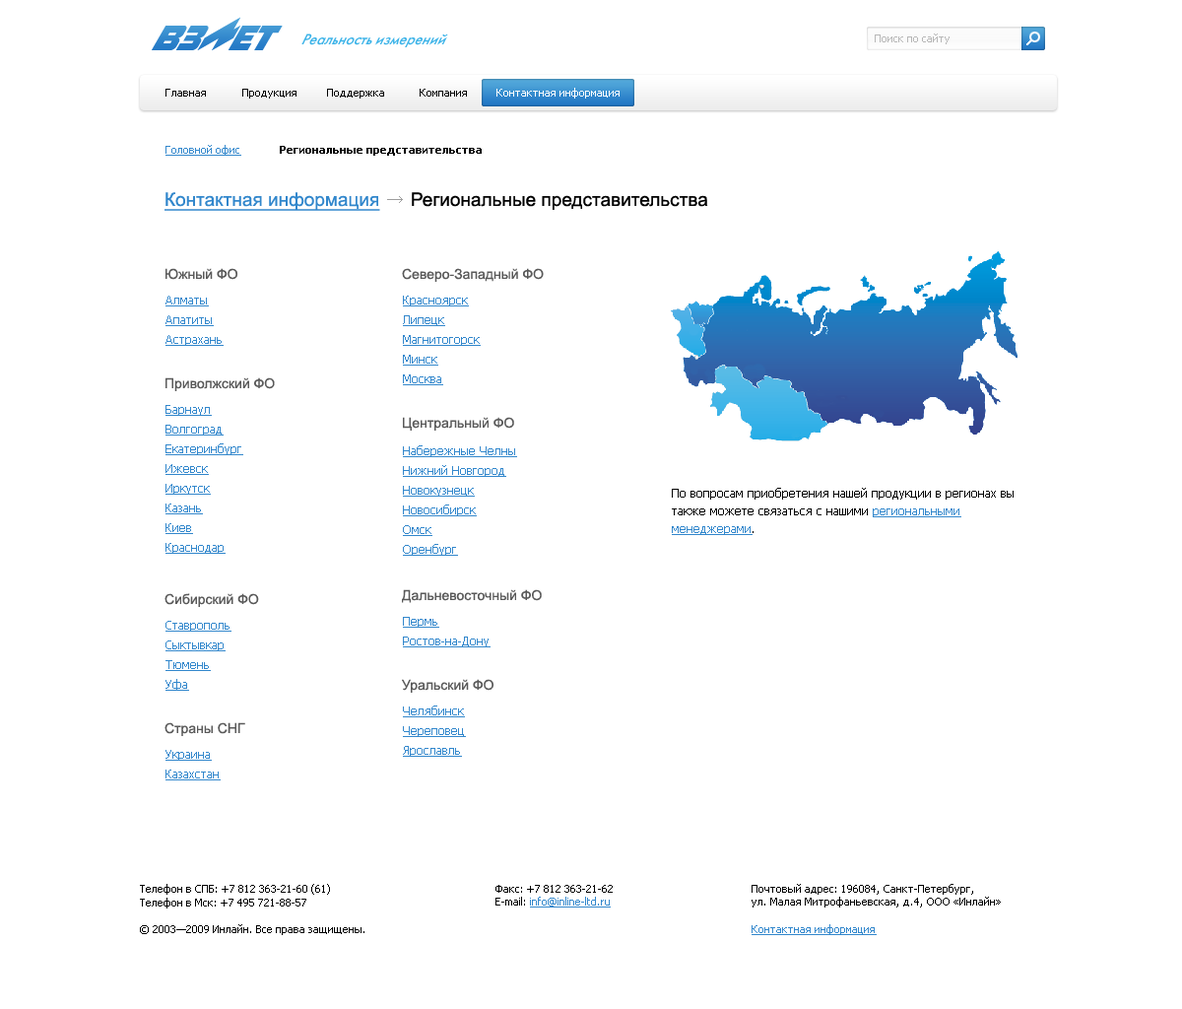
<style>
.page{position:relative;width:1182px;height:1009px;background:#ffffff}
.page>*{position:absolute;margin:0}
.t1{font:15.7px "FuturisC-Italic";color:#3cb3e8;scale:0.94 1}
.t2{font:10.8px "Tahoma";color:#b7b6b6}
.t3{font:10.8px "Tahoma";color:#000000}
.t4{font:10.8px "Tahoma";color:#ffffff}
.t5{font:10.8px "Tahoma";color:#3287cc;text-decoration:underline}
.t6{font:10.8px "Tahoma-Bold";color:#000000}
.t7{font:18.7px "ArialMT";color:#000000}
.t8{font:18.7px "ArialMT";color:#3287cc;text-decoration:underline}
.t9{font:13.8px "ArialMT";color:#595959}
.t10{font:11.8px/19.7px "Tahoma";color:#3287cc;text-decoration:underline}
.t11{font:11.8px/17.7px "Tahoma";color:#000000}
.t12{font:11.8px/17.7px "Tahoma";color:#3287cc;text-decoration:underline}
.t13{font:14.8px "Arial-BoldMT";color:#000000}
</style>
<div class="page">
<p class="t1" style="left:301px;top:33px;width:147px;height:14px">Реальность измерений</p>
<p class="t2" style="left:875px;top:33px;width:75px;height:11px">Поиск по сайту</p>
<p class="t3" style="left:165px;top:89px;width:41px;height:8px">Главная</p>
<p class="t3" style="left:242px;top:89px;width:55px;height:10px">Продукция</p>
<p class="t3" style="left:327px;top:89px;width:57px;height:10px">Поддержка</p>
<p class="t3" style="left:420px;top:89px;width:47px;height:8px">Компания</p>
<p class="t4" style="left:496px;top:88px;width:124px;height:11px">Контактная информация</p>
<p class="t5" style="left:165px;top:145px;width:76px;height:11px">Головной офис</p>
<p class="t6" style="left:280px;top:146px;width:202px;height:10px">Региональные представительства</p>
<p class="t7" style="left:165px;top:192px;width:543px;height:19px"><span class="t8">Контактная информация      </span>Региональные представительства</p>
<p class="t9" style="left:165px;top:268px;width:72px;height:12px">Южный ФО</p>
<p class="t9" style="left:402px;top:268px;width:142px;height:14px">Северо-Западный ФО</p>
<p class="t10" style="left:165px;top:296px;width:59px;height:50px">Алматы<br>Апатиты<br>Астрахань</p>
<p class="t10" style="left:403px;top:296px;width:78px;height:89px">Красноярск<br>Липецк<br>Магнитогорск<br>Минск<br>Москва</p>
<p class="t9" style="left:165px;top:377px;width:110px;height:14px">Приволжский ФО</p>
<p class="t10" style="left:165px;top:405px;width:78px;height:149px">Барнаул<br>Волгоград<br>Екатеринбург<br>Ижевск<br>Иркутск<br>Казань<br>Киев<br>Краснодар</p>
<p class="t9" style="left:403px;top:417px;width:111px;height:13px">Центральный ФО</p>
<p class="t10" style="left:403px;top:445px;width:114px;height:111px">Набережные Челны<br>Нижний Новгород<br>Новокузнецк<br>Новосибирск<br>Омск<br>Оренбург</p>
<p class="t11" style="left:672px;top:488px;width:342px;height:47px">По вопросам приобретения нашей продукции в регионах вы также можете связаться с нашими <span class="t12">региональными менеджерами</span>.</p>
<p class="t9" style="left:165px;top:593px;width:94px;height:14px">Сибирский ФО</p>
<p class="t9" style="left:402px;top:589px;width:140px;height:14px">Дальневосточный ФО</p>
<p class="t10" style="left:403px;top:617px;width:88px;height:30px">Пермь<br>Ростов-на-Дону</p>
<p class="t10" style="left:165px;top:621px;width:66px;height:70px">Ставрополь<br>Сыктывкар<br>Тюмень<br>Уфа</p>
<p class="t9" style="left:402px;top:679px;width:92px;height:14px">Уральский ФО</p>
<p class="t10" style="left:403px;top:705px;width:63px;height:52px">Челябинск<br>Череповец<br>Ярославль</p>
<p class="t9" style="left:165px;top:722px;width:80px;height:14px">Страны СНГ</p>
<p class="t10" style="left:165px;top:750px;width:56px;height:30px">Украина<br>Казахстан</p>
<p class="t3" style="left:140px;top:884px;width:190px;height:24px">Телефон в СПБ: +7 812 363-21-60 (61)<br>Телефон в Мск: +7 495 721-88-57</p>
<p class="t3" style="left:496px;top:885px;width:117px;height:22px"><span class="t13"><br><br></span>Факс: +7 812 363-21-62<br>E-mail: <span class="t5">info@inline-ltd.ru</span></p>
<p class="t3" style="left:752px;top:884px;width:249px;height:23px"><span class="t13"><br><br></span>Почтовый адрес: 196084, Санкт-Петербург,<br>ул. Малая Митрофаньевская, д.4, ООО «Инлайн»</p>
<p class="t3" style="left:140px;top:924px;width:224px;height:11px">© 2003—2009 Инлайн. Все права защищены.</p>
<p class="t5" style="left:752px;top:924px;width:125px;height:11px">Контактная информация</p>
</div>
